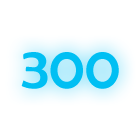
<style>
.page{position:relative;width:140px;height:140px;background:#ffffff}
.page>*{position:absolute;margin:0}
.t1{font:60px "BerlinSansFB-Reg";color:#00bff3}
</style>
<div class="page">
<p class="t1" style="left:21px;top:52px;width:98px;height:37px">300</p>
</div>
